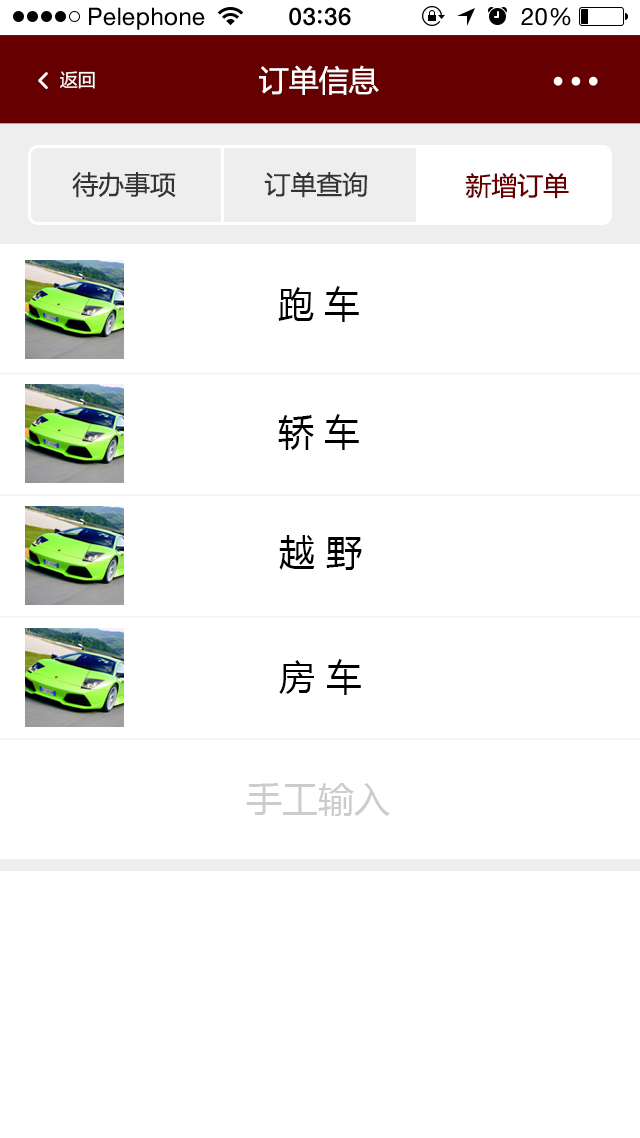
<style>
.page{position:relative;width:640px;height:1138px;background:#ffffff}
.page>*{position:absolute;margin:0}
.t1{font:24px "HelveticaNeue";letter-spacing:0.02em;color:#000000}
.t2{font:24px "HelveticaNeue-Medium";letter-spacing:0.03em;color:#000000}
.t3{font:29.9px "MicrosoftYaHei";color:#ffffff}
.t4{font:18px "MicrosoftYaHei";color:#ffffff}
.t5{font:25.8px "MicrosoftYaHei";color:#333333}
.t6{font:25.8px "MicrosoftYaHei";color:#660000}
.t7{font:36px "MicrosoftYaHei";color:#000000}
.t8{font:36px "MicrosoftYaHei";color:#cccccc}
</style>
<div class="page">
<p class="t1" style="left:89px;top:7px;width:116px;height:23px">Pelephone</p>
<p class="t2" style="left:289px;top:7px;width:62px;height:19px">03 36</p>
<p class="t1" style="left:521px;top:7px;width:50px;height:19px">20%</p>
<p class="t3" style="left:259px;top:65px;width:120px;height:30px">订单信息</p>
<p class="t4" style="left:60px;top:71px;width:35px;height:18px">返回</p>
<p class="t5" style="left:72px;top:172px;width:104px;height:26px">待办事项</p>
<p class="t5" style="left:264px;top:172px;width:103px;height:26px">订单查询</p>
<p class="t6" style="left:465px;top:173px;width:104px;height:26px">新增订单</p>
<p class="t7" style="left:278px;top:286px;width:81px;height:36px">跑 车</p>
<p class="t7" style="left:278px;top:414px;width:81px;height:36px">轿 车</p>
<p class="t7" style="left:279px;top:535px;width:83px;height:35px">越 野</p>
<p class="t7" style="left:279px;top:659px;width:82px;height:36px">房 车</p>
<p class="t8" style="left:246px;top:783px;width:144px;height:33px">手工输入</p>
</div>
